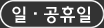
<style>
.page{position:relative;width:104px;height:28px;background:#333333}
.page>*{position:absolute;margin:0}
.t1{font:18.1px "CreGoB";color:#ffffff}
</style>
<div class="page">
<p class="t1" style="left:12px;top:6px;width:79px;height:18px">일·공휴일</p>
</div>
